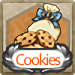
<style>
.page{position:relative;width:75px;height:75px}
.page>*{position:absolute;margin:0}
.t1{font:16px "AdobeClean-Regular";letter-spacing:-0.08em;color:#ff5a00}
</style>
<div class="page">
<p class="t1" style="left:16px;top:53px;width:45px;height:13px">Cookies</p>
</div>
